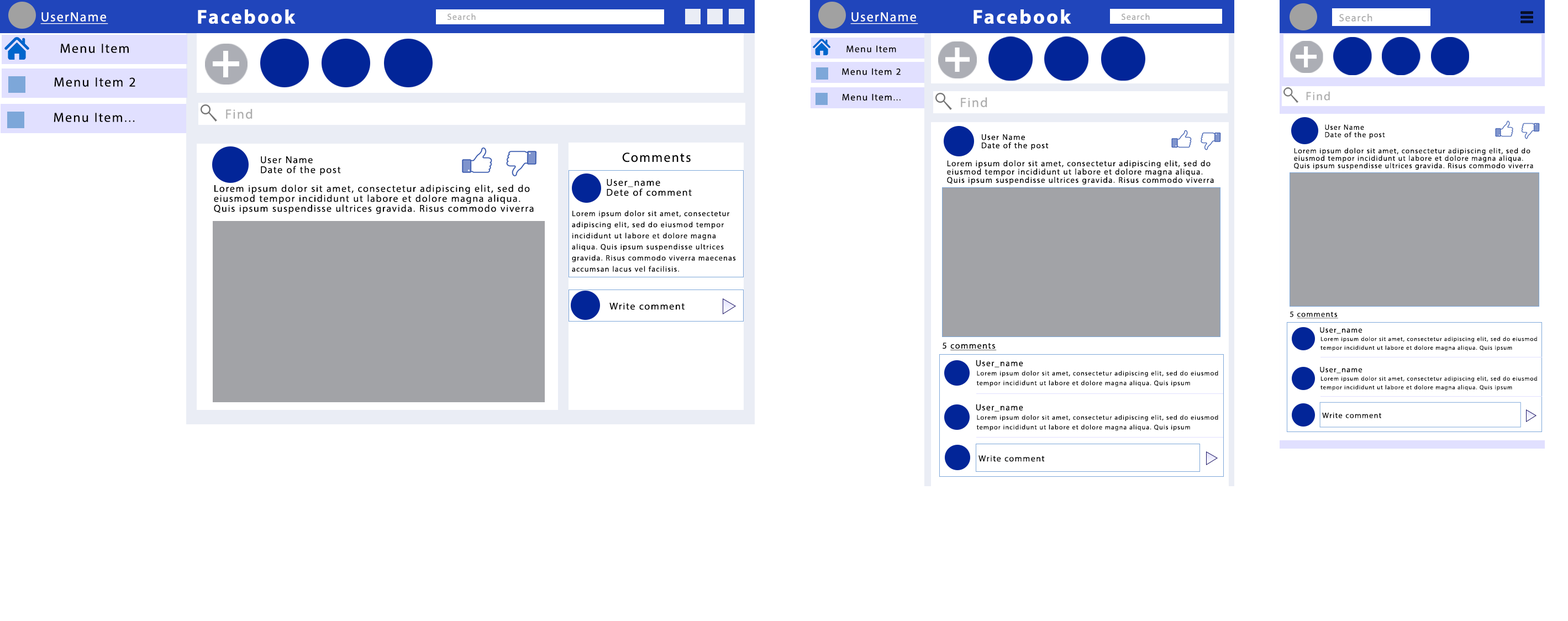
<style>
.page{position:relative;width:1568px;height:621px;background:#ffffff}
.page>*{position:absolute;margin:0}
.t1{font:13.3px "MyriadPro-Regular";letter-spacing:0.1em;color:#fefefe;text-decoration:underline}
.t2{font:19.9px "MyriadPro-Bold";letter-spacing:0.1em;color:#ffffff}
.t3{font:8.8px "MyriadPro-Regular";letter-spacing:0.1em;color:#acacac}
.t4{font:10.4px "MyriadPro-Regular";letter-spacing:0.1em;color:#acacac}
.t5{font:13.3px "MyriadPro-Regular";letter-spacing:0.1em;color:#000000}
.t6{font:9.6px "MyriadPro-Regular";letter-spacing:0.1em;color:#000000}
.t7{font:13.3px "MyriadPro-Regular";letter-spacing:0.1em;color:#acacac}
.t8{font:11.9px "MyriadPro-Regular";letter-spacing:0.1em;color:#acacac}
.t9{font:7.4px/7.4px "MyriadPro-Regular";letter-spacing:0.1em;color:#000000}
.t10{font:8.3px/8.3px "MyriadPro-Regular";letter-spacing:0.1em;color:#000000}
.t11{font:9.9px/9.9px "MyriadPro-Regular";letter-spacing:0.1em;color:#000000}
.t12{font:7.7px/11.1px "MyriadPro-Regular";letter-spacing:0.1em;color:#000000}
.t13{font:9.9px "MyriadPro-Regular";letter-spacing:0.1em;color:#000000}
.t14{font:7.9px "MyriadPro-Regular";letter-spacing:0.1em;color:#000000;text-decoration:underline}
.t15{font:7.9px "MyriadPro-Regular";letter-spacing:0.1em;color:#000000}
.t16{font:7.8px "MyriadPro-Regular";letter-spacing:0.1em;color:#000000}
.t17{font:5.9px/8.7px "MyriadPro-Regular";letter-spacing:0.1em;color:#000000}
.t18{font:8.8px "MyriadPro-Regular";letter-spacing:0.1em;color:#000000;text-decoration:underline}
.t19{font:8.8px "MyriadPro-Regular";letter-spacing:0.1em;color:#000000}
.t20{font:8.7px "MyriadPro-Regular";letter-spacing:0.1em;color:#000000}
.t21{font:6.6px/9.7px "MyriadPro-Regular";letter-spacing:0.1em;color:#000000}
</style>
<div class="page">
<p class="t1" style="left:40px;top:12px;width:68px;height:12px">UserName</p>
<p class="t2" style="left:198px;top:9px;width:98px;height:15px">Facebook</p>
<p class="t3" style="left:448px;top:13px;width:28px;height:7px">Search</p>
<p class="t1" style="left:850px;top:12px;width:68px;height:12px">UserName</p>
<p class="t2" style="left:974px;top:9px;width:97px;height:15px">Facebook</p>
<p class="t3" style="left:1122px;top:13px;width:28px;height:7px">Search</p>
<p class="t4" style="left:1339px;top:14px;width:33px;height:8px">Search</p>
<p class="t5" style="left:60px;top:44px;width:69px;height:9px">Menu Item</p>
<p class="t6" style="left:846px;top:45px;width:50px;height:7px">Menu Item</p>
<p class="t5" style="left:54px;top:77px;width:81px;height:10px">Menu Item 2</p>
<p class="t6" style="left:842px;top:68px;width:59px;height:7px">Menu Item 2</p>
<p class="t6" style="left:842px;top:94px;width:59px;height:7px">Menu Item...</p>
<p class="t7" style="left:961px;top:97px;width:26px;height:10px">Find</p>
<p class="t8" style="left:1306px;top:91px;width:24px;height:10px">Find</p>
<p class="t5" style="left:54px;top:113px;width:81px;height:9px">Menu Item...</p>
<p class="t7" style="left:226px;top:109px;width:26px;height:10px">Find</p>
<p class="t9" style="left:1325px;top:124px;width:60px;height:15px">User Name<br>Date of the post</p>
<p class="t10" style="left:982px;top:134px;width:67px;height:16px">User Name<br>Date of the post</p>
<p class="t9" style="left:1294px;top:148px;width:239px;height:22px">Lorem ipsum dolor sit amet, consectetur adipiscing elit, sed do eiusmod tempor incididunt ut labore et dolore magna aliqua. Quis ipsum suspendisse ultrices gravida. Risus commodo viverra maecenas accumsan lacus vel facilisis.</p>
<p class="t11" style="left:261px;top:156px;width:80px;height:19px">User Name<br>Date of the post</p>
<p class="t5" style="left:622px;top:152px;width:69px;height:10px">Comments</p>
<p class="t10" style="left:947px;top:160px;width:267px;height:25px">Lorem ipsum dolor sit amet, consectetur adipiscing elit, sed do eiusmod tempor incididunt ut labore et dolore magna aliqua. Quis ipsum suspendisse ultrices gravida. Risus commodo viverra maecenas accumsan lacus vel facilisis.</p>
<p class="t11" style="left:214px;top:185px;width:320px;height:29px">Lorem ipsum dolor sit amet, consectetur adipiscing elit, sed do eiusmod tempor incididunt ut labore et dolore magna aliqua. Quis ipsum suspendisse ultrices gravida. Risus commodo viverra maecenas accumsan lacus vel facilisis.</p>
<p class="t11" style="left:607px;top:179px;width:85px;height:17px">User_name<br>Dete of comment</p>
<p class="t12" style="left:572px;top:211px;width:164px;height:61px">Lorem ipsum dolor sit amet, consectetur adipiscing elit, sed do eiusmod tempor incididunt ut labore et dolore magna aliqua. Quis ipsum suspendisse ultrices gravida. Risus commodo viverra maecenas accumsan lacus vel facilisis.</p>
<p class="t13" style="left:609px;top:303px;width:76px;height:7px">Write comment</p>
<p class="t14" style="left:1290px;top:312px;width:48px;height:7px"><span class="t15">5 </span>comments</p>
<p class="t16" style="left:1320px;top:327px;width:42px;height:7px">User_name</p>
<p class="t17" style="left:1320px;top:336px;width:217px;height:15px">Lorem ipsum dolor sit amet, consectetur adipiscing elit, sed do eiusmod tempor incididunt ut labore et dolore magna aliqua. Quis ipsum suspendisse ultrices gravida. Risus commodo viverra maecenas accumsan lacus vel facilisis.</p>
<p class="t18" style="left:943px;top:343px;width:54px;height:7px"><span class="t19">5 </span>comments</p>
<p class="t20" style="left:976px;top:360px;width:47px;height:7px">User_name</p>
<p class="t21" style="left:976px;top:371px;width:242px;height:16px">Lorem ipsum dolor sit amet, consectetur adipiscing elit, sed do eiusmod tempor incididunt ut labore et dolore magna aliqua. Quis ipsum suspendisse ultrices gravida. Risus commodo viverra maecenas accumsan lacus vel facilisis.</p>
<p class="t16" style="left:1320px;top:367px;width:42px;height:6px">User_name</p>
<p class="t17" style="left:1320px;top:376px;width:217px;height:15px">Lorem ipsum dolor sit amet, consectetur adipiscing elit, sed do eiusmod tempor incididunt ut labore et dolore magna aliqua. Quis ipsum suspendisse ultrices gravida. Risus commodo viverra maecenas accumsan lacus vel facilisis.</p>
<p class="t20" style="left:976px;top:404px;width:47px;height:8px">User_name</p>
<p class="t16" style="left:1322px;top:412px;width:59px;height:6px">Write comment</p>
<p class="t21" style="left:976px;top:415px;width:242px;height:16px">Lorem ipsum dolor sit amet, consectetur adipiscing elit, sed do eiusmod tempor incididunt ut labore et dolore magna aliqua. Quis ipsum suspendisse ultrices gravida. Risus commodo viverra maecenas accumsan lacus vel facilisis.</p>
<p class="t20" style="left:978px;top:455px;width:67px;height:7px">Write comment</p>
</div>
